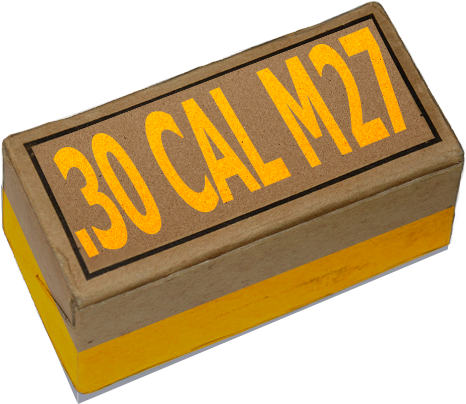
<style>
.page{position:relative;width:466px;height:404px;background:#ffffff}
.page>*{position:absolute;margin:0}
.t1{font:151.3px "Tahoma-Bold";color:#ffc300;scale:0.39 1}
</style>
<div class="page">
<p class="t1" style="left:53px;top:26px;width:354px;height:232px;rotate:-22deg">.30 CAL M27</p>
</div>
